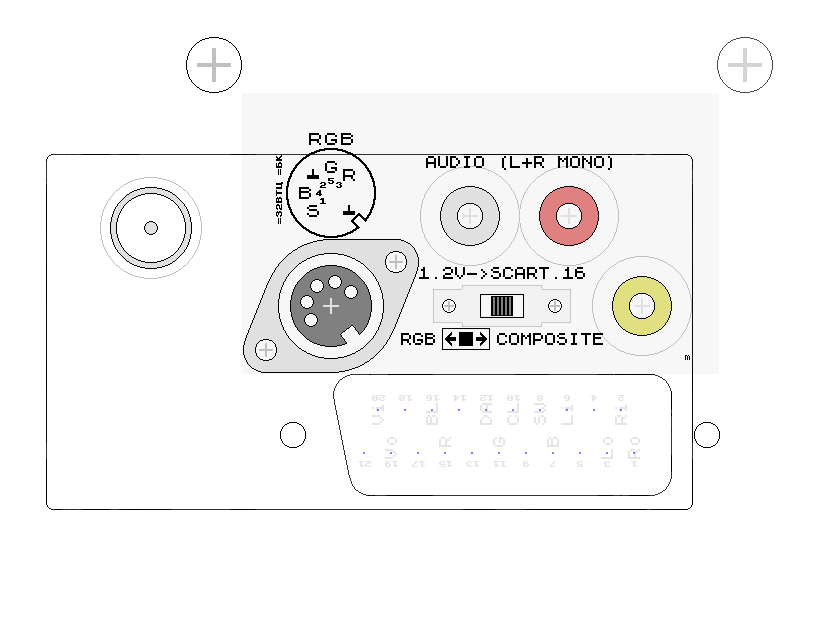
<style>
.page{position:relative;width:816px;height:624px;background:#ffffff}
.page>*{position:absolute;margin:0}
.t1{font:16px "ZX 6x8";color:#000000}
.t2{font:16px/27px "ZX 6x8";color:#e5e5e5}
</style>
<div class="page">
<p class="t1" style="left:426px;top:156px;width:186px;height:14px">AUDIO (L+R MONO)</p>
<p class="t1" style="left:419px;top:267px;width:166px;height:12px">1.2V-&gt;SCART.16</p>
<p class="t1" style="left:401px;top:333px;width:202px;height:12px">RGB     COMPOSITE</p>
<p class="t2" style="left:372px;top:403px;width:255px;height:22px;rotate:-90deg">Vi<br><br>BL<br><br>DA<br>CL<br>SW<br>Li<br><br>Ri</p>
<p class="t2" style="left:385px;top:437px;width:255px;height:22px;rotate:-90deg">Vo<br><br> R<br><br> G<br><br> B<br><br>Lo<br>Ro</p>
</div>
